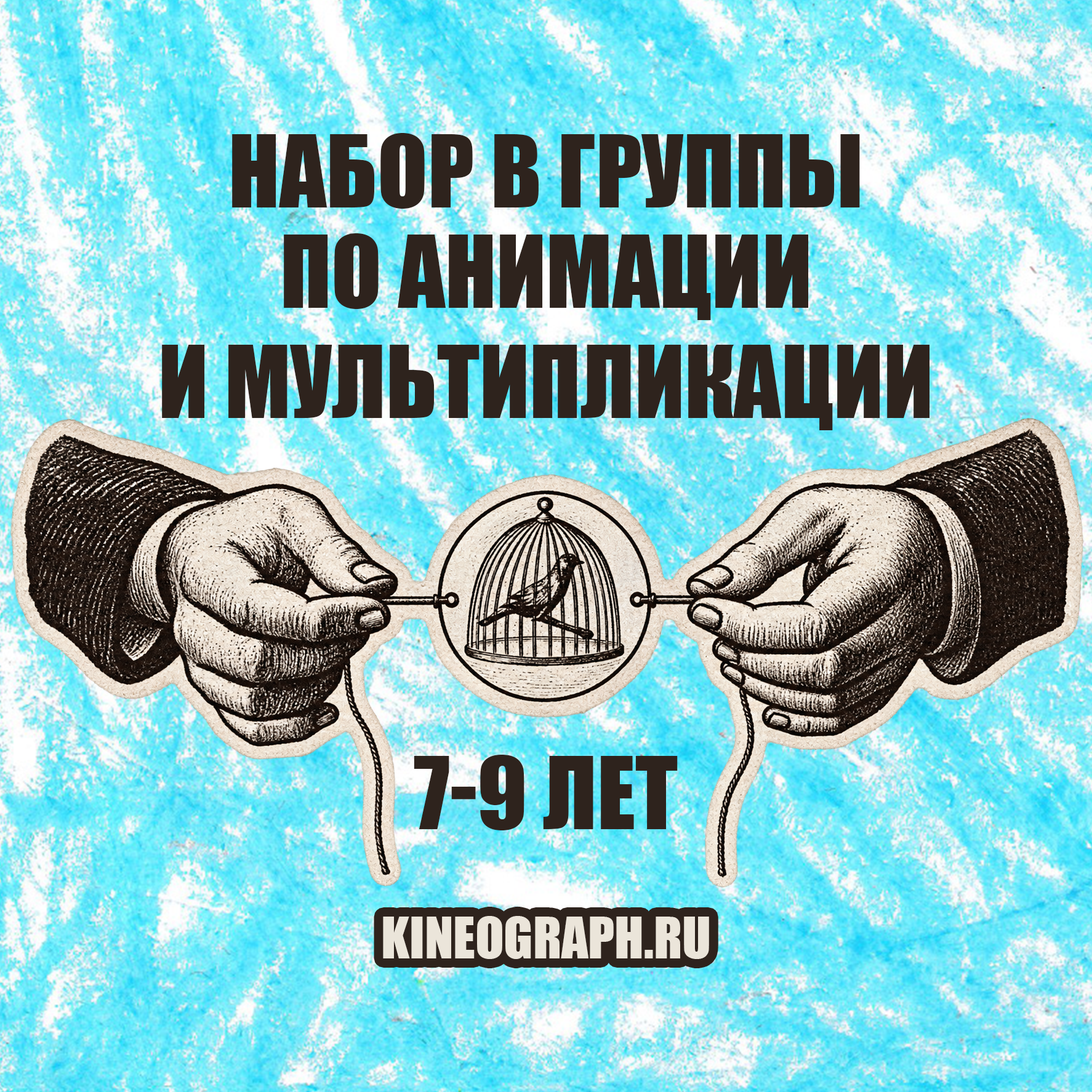
<style>
.page{position:relative;width:1092px;height:1092px}
.page>*{position:absolute;margin:0}
.t1{font:92.3px "Impact";color:#2e231d;text-transform:uppercase}
.t2{font:52.8px "Impact";color:#ebe5da;text-transform:uppercase}
</style>
<div class="page">
<p class="t1" style="left:232px;top:133px;width:628px;height:76px">Набор в группы</p>
<p class="t1" style="left:284px;top:233px;width:524px;height:87px">по анимации</p>
<p class="t1" style="left:162px;top:345px;width:767px;height:85px">и мультипликации</p>
<p class="t1" style="left:414px;top:755px;width:264px;height:75px">7-9 лет</p>
<p class="t2" style="left:383px;top:916px;width:326px;height:43px">kineograph.ru</p>
</div>
